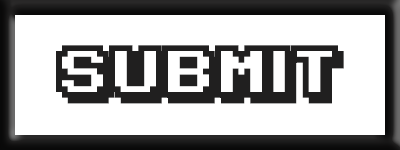
<style>
.page{position:relative;width:400px;height:150px;background:#ffffff}
.page>*{position:absolute;margin:0}
.t1{font:60px "KarmaticArcade";color:#201f1f}
</style>
<div class="page">
<p class="t1" style="left:56px;top:45px;width:288px;height:59px">SUBMIT</p>
</div>
